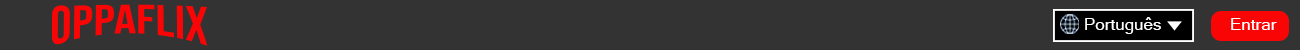
<style>
.page{position:relative;width:1300px;height:50px;background:#333333}
.page>*{position:absolute;margin:0}
.t1{font:56px "BebasNeue-Regular";color:#fa0505}
.t2{font:17px "MicrosoftSansSerif";color:#ffffff}
</style>
<div class="page">
<p class="t1" style="left:52px;top:4px;width:156px;height:42px">oppaflix</p>
<p class="t2" style="left:1085px;top:17px;width:76px;height:17px">Português</p>
<p class="t2" style="left:1231px;top:18px;width:46px;height:12px">Entrar</p>
</div>
